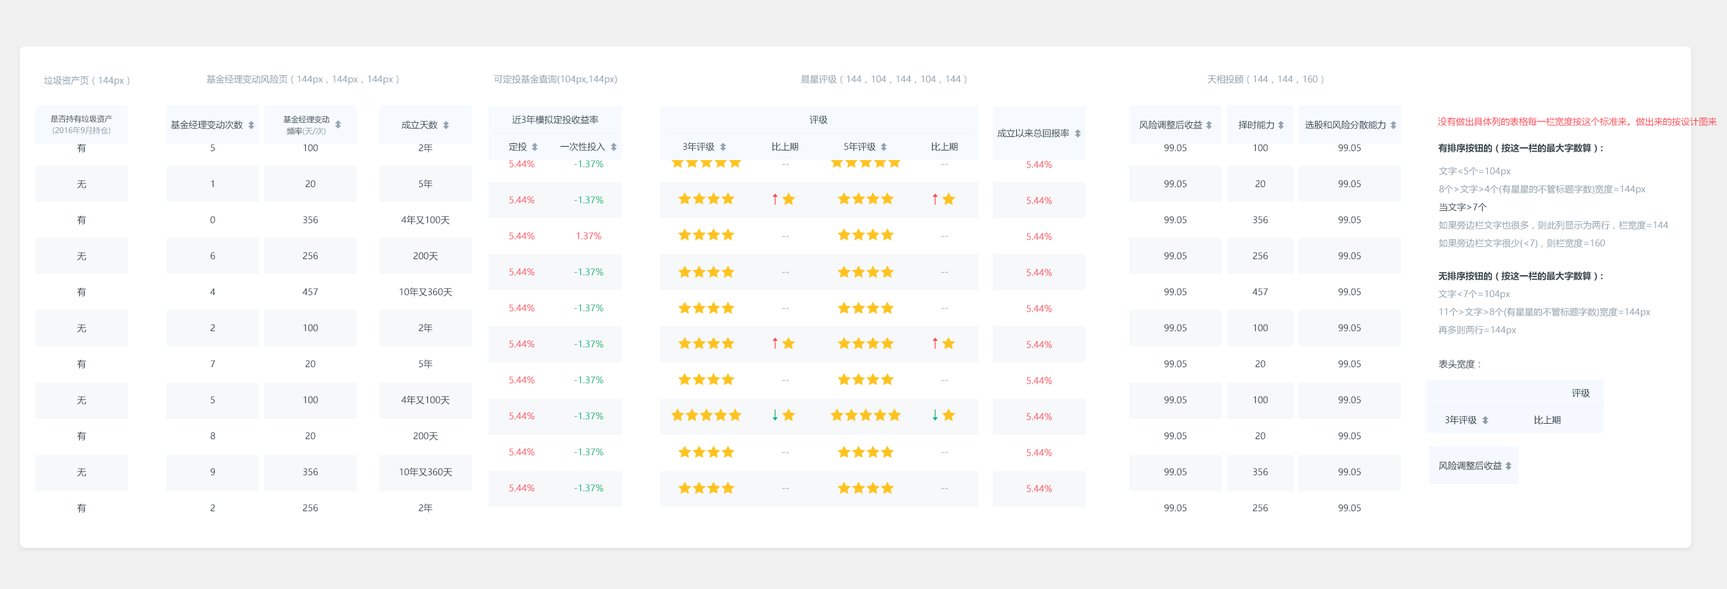
<style>
.page{position:relative;width:1727px;height:589px;background:#ffffff}
.page>*{position:absolute;margin:0}
.t1{font:9px "MicrosoftYaHei";color:#8e9eab}
.t2{font:7.7px/11.6px "MicrosoftYaHei";color:#8e9eab}
.t3{font:7.7px/11.6px "MicrosoftYaHei";color:#34444d}
.t4{font:9px "MicrosoftYaHei";color:#34444d}
.t5{font:9px "MicrosoftYaHei";color:#ff3e4f}
.t6{font:9px/36px "MicrosoftYaHei";color:#34444d}
.t7{font:9px "MicrosoftYaHei-Bold";color:#34444d}
.t8{font:9px/36px "MicrosoftYaHei";color:#ff4858}
.t9{font:9px/36px "MicrosoftYaHei";color:#0db578}
.t10{font:9px/36px "MicrosoftYaHei"}
.t11{font:9px/18px "MicrosoftYaHei";color:#8e9eab}
.t12{font:9px/18px "MicrosoftYaHei";color:#34444d}
.t13{font:11.5px "MicrosoftYaHei-Bold";color:#ff3e4f}
.t14{font:9px/18px "MicrosoftYaHei-Bold";color:#34444d}
.t15{font:11.5px "MicrosoftYaHei-Bold";color:#0db578}
</style>
<div class="page">
<p class="t1" style="left:44px;top:76px;width:86px;height:10px">垃圾资产页（144px）</p>
<p class="t1" style="left:206px;top:75px;width:193px;height:10px">基金经理变动风险页（144px，144px，144px）</p>
<p class="t1" style="left:494px;top:75px;width:123px;height:10px">可定投基金查询(104px,144px)</p>
<p class="t1" style="left:801px;top:75px;width:166px;height:9px">晨星评级（144，104，144，104，144）</p>
<p class="t1" style="left:1208px;top:75px;width:116px;height:9px">天相投顾（144，144，160）</p>
<p class="t2" style="left:50px;top:114px;width:63px;height:20px;text-align:center"><span class="t3">是否持有垃圾资产<br></span>(2016年9月持仓)</p>
<p class="t4" style="left:171px;top:120px;width:72px;height:9px">基金经理变动次数</p>
<p class="t3" style="left:284px;top:116px;width:45px;height:19px;text-align:center">基金经理变动<br>频率<span class="t2">(天/次)</span></p>
<p class="t4" style="left:402px;top:120px;width:36px;height:9px">成立天数</p>
<p class="t4" style="left:512px;top:115px;width:86px;height:9px">近3年模拟定投收益率</p>
<p class="t4" style="left:810px;top:115px;width:18px;height:9px">评级</p>
<p class="t4" style="left:1140px;top:120px;width:63px;height:9px">风险调整后收益</p>
<p class="t4" style="left:1239px;top:120px;width:35px;height:9px">择时能力</p>
<p class="t4" style="left:1306px;top:120px;width:80px;height:9px">选股和风险分散能力</p>
<p class="t5" style="left:1438px;top:117px;width:279px;height:9px">没有做出具体列的表格每一栏宽度按这个标准来。做出来的按设计图来</p>
<p class="t4" style="left:998px;top:129px;width:72px;height:9px">成立以来总回报率</p>
<p class="t6" style="left:77px;top:143px;width:9px;height:369px;text-align:center">有<br>无<br>有<br>无<br>有<br>无<br>有<br>无<br>有<br>无<br>有<br>无</p>
<p class="t6" style="left:210px;top:144px;width:5px;height:367px;text-align:center">5<br>1<br>0<br>6<br>4<br>2<br>7<br>5<br>8<br>9<br>2</p>
<p class="t6" style="left:302px;top:144px;width:16px;height:368px;text-align:center">100<br>20<br>356<br>256<br>457<br>100<br>20<br>100<br>20<br>356<br>256<br>457<br>100<br>20</p>
<p class="t6" style="left:400px;top:143px;width:53px;height:369px;text-align:center">2年<br>5年<br>4年又100天<br>200天<br>10年又360天<br>2年<br>5年<br>4年又100天<br>200天<br>10年又360天<br>2年<br>5年<br>4年又100天<br>200天<br>10年又360天</p>
<p class="t4" style="left:509px;top:142px;width:18px;height:9px">定投</p>
<p class="t4" style="left:561px;top:142px;width:45px;height:9px">一次性投入</p>
<p class="t4" style="left:683px;top:142px;width:32px;height:9px">3年评级</p>
<p class="t4" style="left:772px;top:142px;width:26px;height:9px">比上期</p>
<p class="t4" style="left:844px;top:142px;width:32px;height:9px">5年评级</p>
<p class="t4" style="left:932px;top:142px;width:26px;height:9px">比上期</p>
<p class="t6" style="left:1164px;top:144px;width:23px;height:368px;text-align:center">99.05<br>99.05<br>99.05<br>99.05<br>99.05<br>99.05<br>99.05<br>99.05<br>99.05<br>99.05<br>99.05<br>99.05</p>
<p class="t6" style="left:1252px;top:144px;width:16px;height:368px;text-align:center">100<br>20<br>356<br>256<br>457<br>100<br>20<br>100<br>20<br>356<br>256<br>457<br>100<br>20</p>
<p class="t6" style="left:1338px;top:144px;width:23px;height:368px;text-align:center">99.05<br>99.05<br>99.05<br>99.05<br>99.05<br>99.05<br>99.05<br>99.05<br>99.05<br>99.05<br>99.05<br>99.05</p>
<p class="t7" style="left:1439px;top:143px;width:164px;height:10px">有排序按钮的（按这一栏的最大字数算）:</p>
<p class="t8" style="left:509px;top:160px;width:26px;height:332px;text-align:center">5.44%<br>5.44%<br>5.44%<br>5.44%<br>5.44%<br>5.44%<br>5.44%<br>5.44%<br>5.44%<br>5.44%</p>
<p class="t9" style="left:574px;top:160px;width:30px;height:332px;text-align:center">-1.37%<br>-1.37%<br><span class="t8">1.37%<br></span>-1.37%<br>-1.37%<br>-1.37%<br>-1.37%<br>-1.37%<br>-1.37%<br>-1.37%</p>
<p class="t8" style="left:1027px;top:161px;width:25px;height:331px;text-align:center">5.44%<br>5.44%<br>5.44%<br>5.44%<br>5.44%<br>5.44%<br>5.44%<br>5.44%<br>5.44%<br>5.44%</p>
<p class="t10" style="left:782px;top:164px;width:7px;height:325px;text-align:center">--<br><br>--<br>--<br>--<br><br>--<br><br>--<br>--</p>
<p class="t10" style="left:941px;top:164px;width:7px;height:325px;text-align:center">--<br><br>--<br>--<br>--<br><br>--<br><br>--<br>--</p>
<p class="t11" style="left:1439px;top:166px;width:230px;height:82px">文字&lt;5个=104px<br>8个&gt;文字&gt;4个(有星星的不管标题字数)宽度=144px<br><span class="t12">当文字&gt;7个<br></span>如果旁边栏文字也很多，则此列显示为两行，栏宽度=144<br>如果旁边栏文字很少(&lt;7)，则栏宽度=160</p>
<p class="t13" style="left:773px;top:194px;width:4px;height:11px;rotate:-90deg">→</p>
<p class="t13" style="left:933px;top:194px;width:4px;height:11px;rotate:-90deg">→</p>
<p class="t11" style="left:1439px;top:271px;width:212px;height:65px"><span class="t14">无排序按钮的（按这一栏的最大字数算）:<br></span>文字&lt;7个=104px<br>11个&gt;文字&gt;8个(有星星的不管标题字数)宽度=144px<br>再多则两行=144px</p>
<p class="t13" style="left:773px;top:338px;width:4px;height:11px;rotate:-90deg">→</p>
<p class="t13" style="left:933px;top:338px;width:4px;height:11px;rotate:-90deg">→</p>
<p class="t4" style="left:1439px;top:359px;width:41px;height:9px"><span class="t1"><br></span><br>表头宽度：</p>
<p class="t15" style="left:773px;top:409px;width:4px;height:11px;rotate:90deg">→</p>
<p class="t15" style="left:933px;top:409px;width:4px;height:11px;rotate:90deg">→</p>
</div>
